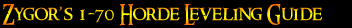
<style>
.page{position:relative;width:352px;height:28px;background:#000000}
.page>*{position:absolute;margin:0}
.t1{font:20px "RingbearerMedium"}
</style>
<div class="page">
<p class="t1" style="left:2px;top:4px;width:320px;height:22px">Zygor’s 1-70 Horde Leveling Guide</p>
</div>
